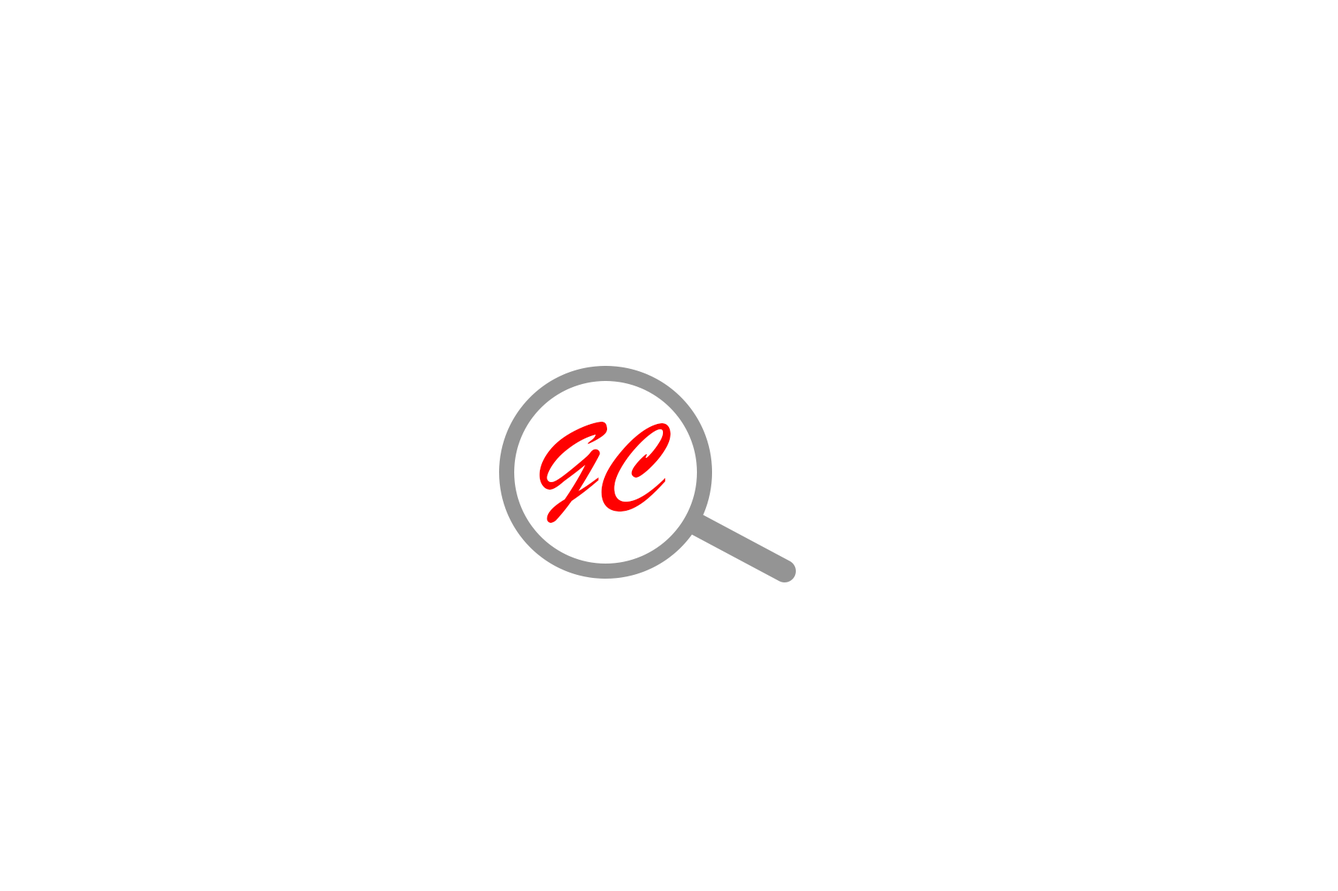
<style>
.page{position:relative;width:1338px;height:891px;background:#ffffff}
.page>*{position:absolute;margin:0}
.t1{font:110.1px "BrushScriptMT";color:#ff0101}
</style>
<div class="page">
<p class="t1" style="left:539px;top:422px;width:131px;height:101px">GC</p>
</div>
